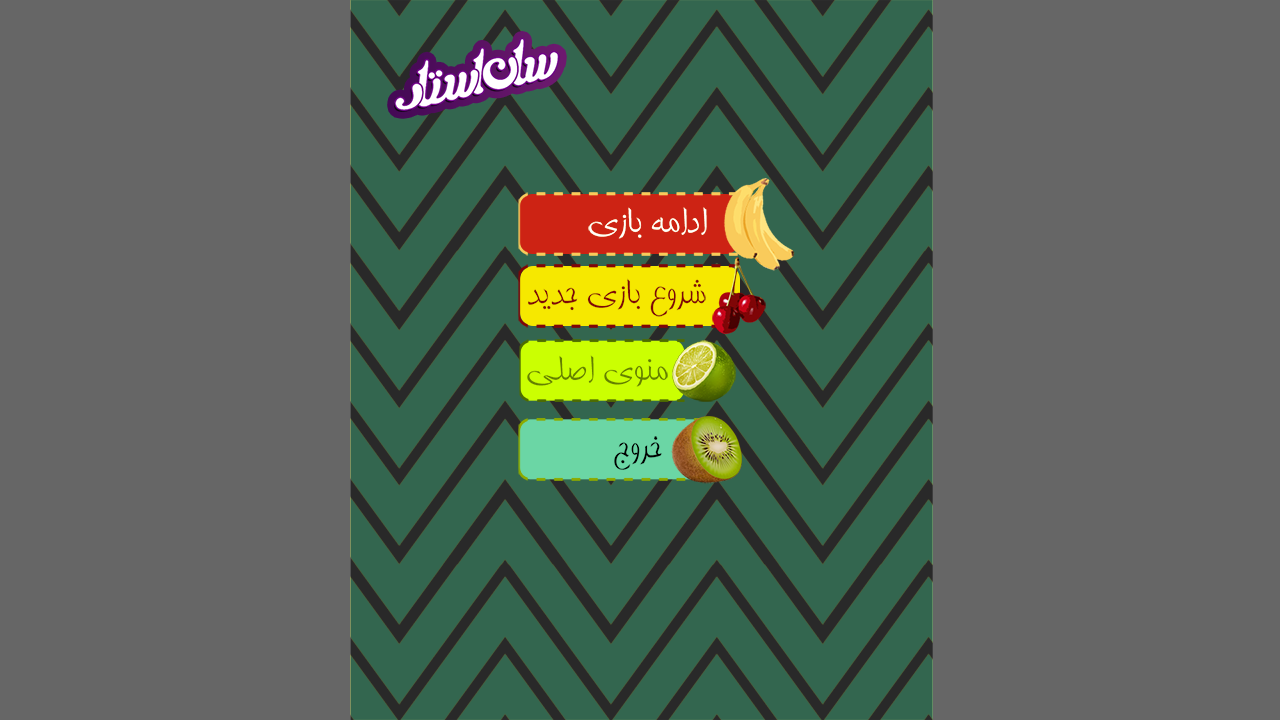
<style>
.page{position:relative;width:1280px;height:720px;background:#666666}
.page>*{position:absolute;margin:0}
.t1{font:41.7px "Tabassom";color:#ffffff}
.t2{font:41.7px "Tabassom";color:#800507}
.t3{font:41.7px "Tabassom";color:#637f00}
.t4{font:41.7px "Tabassom";color:#000000}
</style>
<div class="page">
<p class="t1" style="left:588px;top:207px;width:119px;height:32px">ادامه بازی</p>
<p class="t1" style="left:588px;top:207px;width:119px;height:32px">ادامه بازی</p>
<p class="t2" style="left:528px;top:278px;width:178px;height:39px">شروع بازی جدید</p>
<p class="t3" style="left:527px;top:355px;width:141px;height:32px">منوی اصلی</p>
<p class="t4" style="left:614px;top:436px;width:48px;height:34px">خروج</p>
</div>
